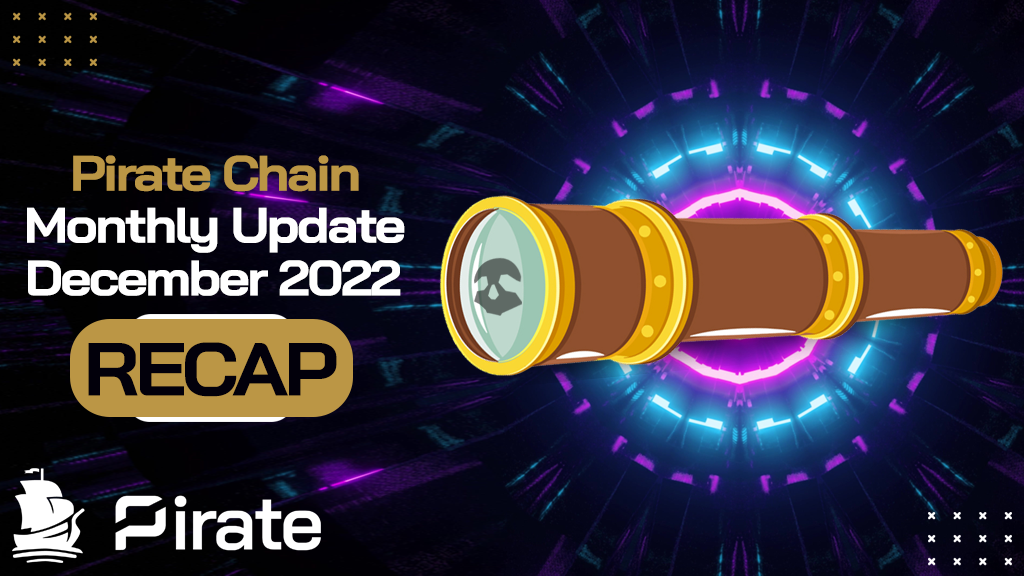
<style>
.page{position:relative;width:1024px;height:576px}
.page>*{position:absolute;margin:0}
.t1{font:49.5px "BaiJamjuree-Bold";letter-spacing:-0.05em;color:#bb9645;scale:1.1 1}
.t2{font:49.5px "BaiJamjuree-Bold";letter-spacing:-0.05em;color:#ffffff;scale:1.1 1}
.t3{font:74.8px "BaiJamjuree-Bold";letter-spacing:-0.05em;color:#02000b;text-transform:uppercase;scale:1.09 1}
</style>
<div class="page">
<p class="t1" style="left:73px;top:155px;width:286px;height:37px">Pirate Chain</p>
<p class="t2" style="left:27px;top:207px;width:378px;height:46px">Monthly Update</p>
<p class="t2" style="left:28px;top:260px;width:373px;height:36px">December 2022</p>
<p class="t3" style="left:88px;top:342px;width:249px;height:55px">recap</p>
</div>
